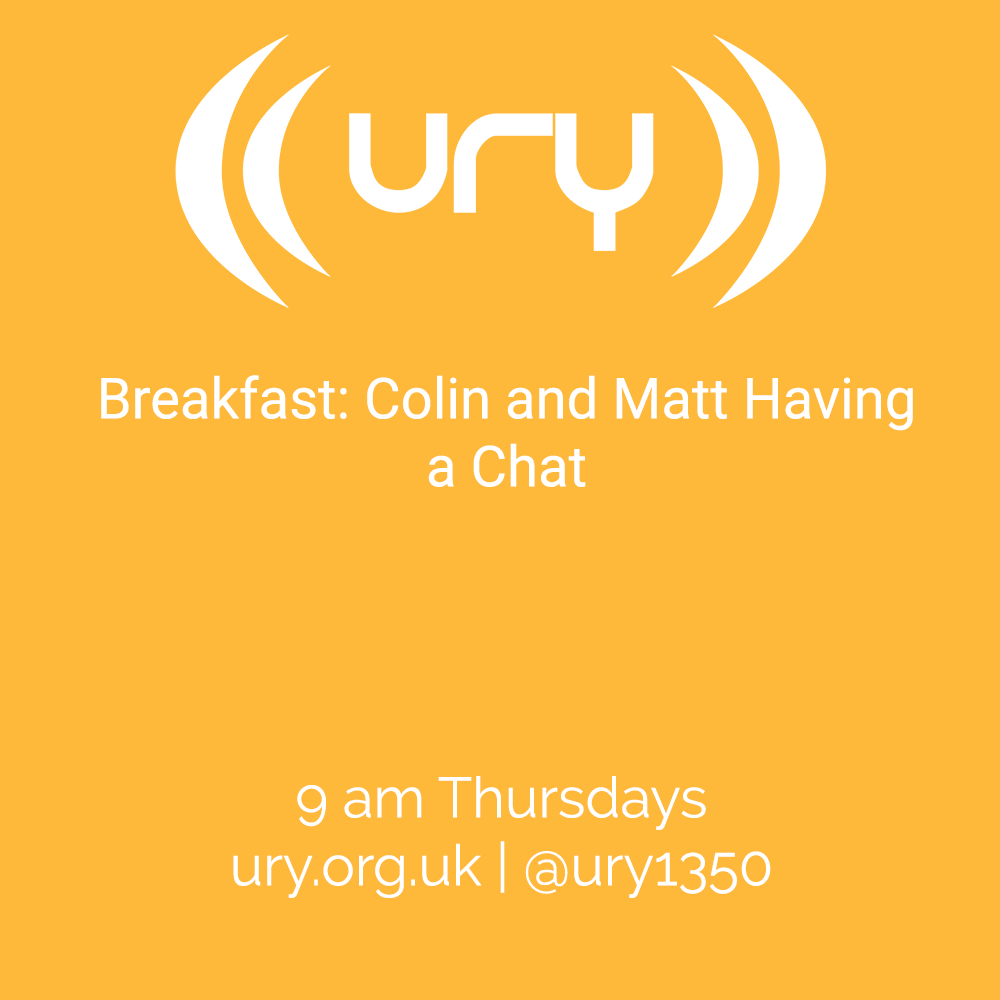
<style>
.page{position:relative;width:1000px;height:1000px;background:#feb93a}
.page>*{position:absolute;margin:0}
.t1{font:56.6px "Roboto-Regular";color:#ffffff}
.t2{font:56.6px "Raleway-Regular";color:#ffffff}
</style>
<div class="page">
<p class="t1" style="left:101px;top:375px;width:812px;height:112px;text-align:center">Breakfast: Colin and Matt Having<br>a Chat</p>
<p class="t2" style="left:233px;top:776px;width:538px;height:122px;text-align:center">9 am Thursdays<br>ury.org.uk | @ury1350</p>
</div>
